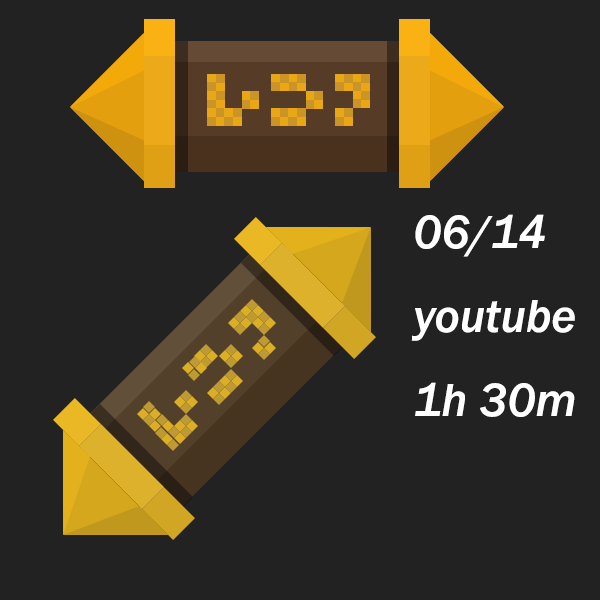
<style>
.page{position:relative;width:600px;height:600px;background:#222222}
.page>*{position:absolute;margin:0}
.t1{font:48px "FranklinGothic-MediumItalic";color:#ffffff}
</style>
<div class="page">
<p class="t1" style="left:411px;top:214px;width:164px;height:203px">06/14<br>youtube<br>1h 30m</p>
</div>
